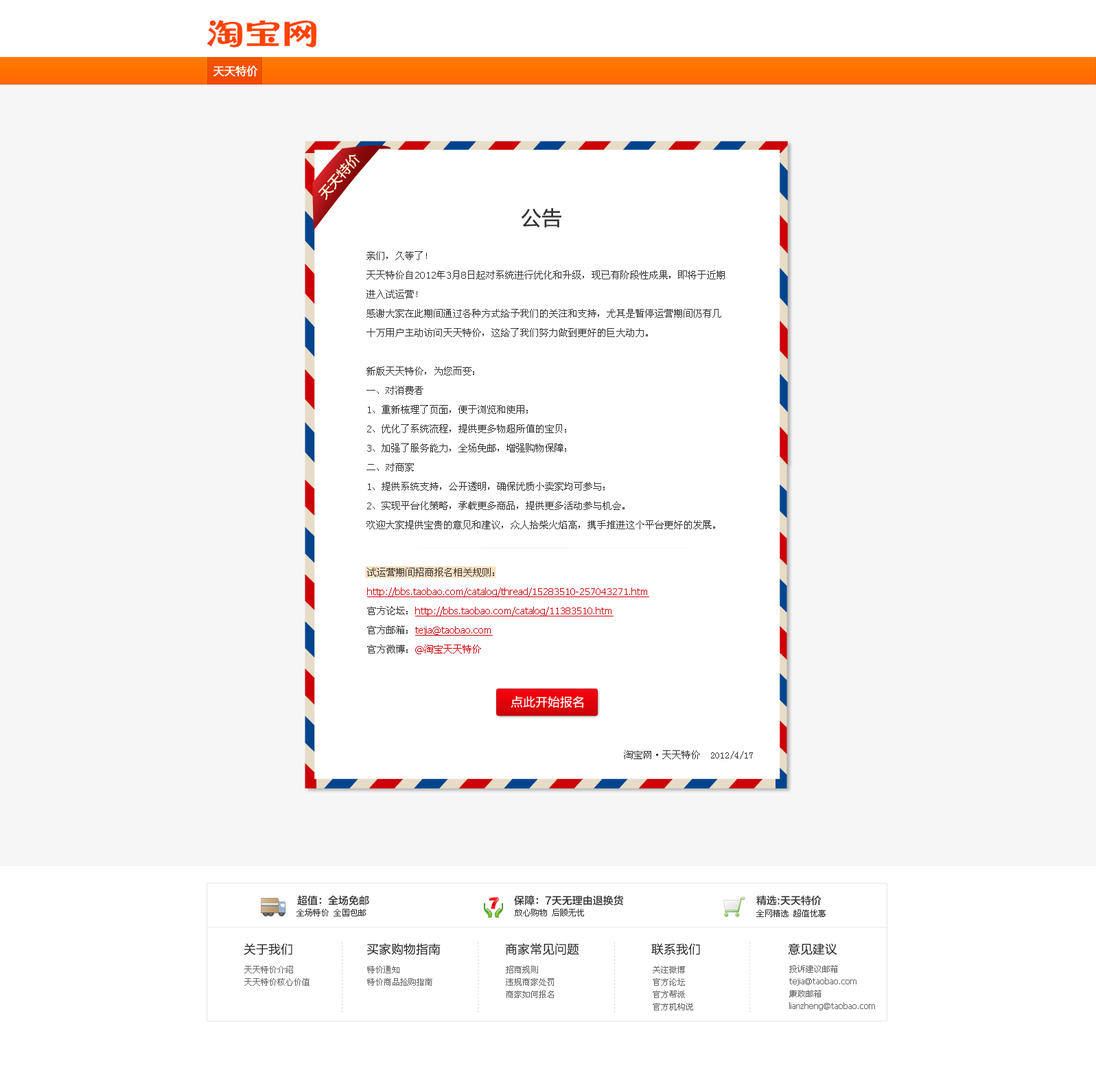
<style>
.page{position:relative;width:1096px;height:1088px;background:#f6f6f6}
.page>*{position:absolute;margin:0}
.t1{font:11.5px "FZLTHJW--GB1-0";letter-spacing:-0.01em;color:#ffffff;font-weight:bold;scale:0.95 1}
.t2{font:13.5px "FZLTZHK--GBK1-0";color:#fff0d3}
.t3{font:20.6px "FZLTZHUNHK--GBK1-0";color:#333333}
.t4{font:9.6px/19.2px "SimSun";color:#333333}
.t5{font:9.6px/19.2px "Tahoma";color:#333333}
.t6{font:9.6px/19.2px "Tahoma";color:#cc0208;text-decoration:underline}
.t7{font:9.6px/19.2px "Tahoma";color:#cc0208}
.t8{font:9.6px/19.2px "SimSun";color:#cc0208}
.t9{font:12.4px "FZLTZHUNHK--GBK1-0";color:#ffffff}
.t10{font:9.6px "SimSun";color:#333333}
.t11{font:10.3px "FZLTZHK--GBK1-0";color:#343434}
.t12{font:8.2px "SimSun";color:#343434}
.t13{font:12.4px "FZLTHJW--GB1-0";color:#232323}
.t14{font:8.2px/12.4px "SimSun";color:#666666}
.t15{font:8.2px/12.4px "Tahoma";color:#666666}
</style>
<div class="page">
<p class="t1" style="left:213px;top:65px;width:45px;height:12px">天天特价</p>
<p class="t2" style="left:318px;top:154px;width:42px;height:46px;rotate:-49deg">天天特价</p>
<p class="t3" style="left:521px;top:208px;width:40px;height:20px">公告</p>
<p class="t4" style="left:367px;top:251px;width:358px;height:278px">亲们，久等了！<br>天天特价自<span class="t5">2012</span>年<span class="t5">3</span>月<span class="t5">8</span>日起对系统进行优化和升级，现已有阶段性成果，即将于近期进入试运营！<br>感谢大家在此期间通过各种方式给予我们的关注和支持，尤其是暂停运营期间仍有几十万用户主动访问天天特价，这给了我们努力做到更好的巨大动力。<br><br>新版天天特价，为您而变：<br>一、对消费者<span class="t5"><br>1</span>、重新梳理了页面，便于浏览和使用；<span class="t5"><br>2</span>、优化了系统流程，提供更多物超所值的宝贝；<span class="t5"><br>3</span>、加强了服务能力，全场免邮，增强购物保障；<br>二、对商家<span class="t5"><br>1</span>、提供系统支持，公开透明，确保优质小卖家均可参与；<span class="t5"><br>2</span>、实现平台化策略，承载更多商品，提供更多活动参与机会。<br>欢迎大家提供宝贵的意见和建议，众人拾柴火焰高，携手推进这个平台更好的发展。</p>
<p class="t6" style="left:367px;top:568px;width:282px;height:86px"><span class="t4">试运营期间招商报名相关规则：<br></span>http://bbs.taobao.com/catalog/thread/15283510-257043271.htm<br><span class="t4">官方论坛：</span>http://bbs.taobao.com/catalog/11383510.htm<br><span class="t4">官方邮箱：</span>tejia@taobao.com<br><span class="t4">官方微博：</span><span class="t7">@</span><span class="t8">淘宝天天特价</span></p>
<p class="t9" style="left:511px;top:696px;width:72px;height:12px">点此开始报名</p>
<p class="t10" style="left:624px;top:750px;width:129px;height:9px">淘宝网·天天特价  2012/4/17</p>
<p class="t11" style="left:297px;top:895px;width:72px;height:10px">超值：全场免邮</p>
<p class="t11" style="left:514px;top:895px;width:110px;height:10px">保障：7天无理由退换货</p>
<p class="t11" style="left:756px;top:895px;width:66px;height:10px">精选:天天特价</p>
<p class="t12" style="left:297px;top:909px;width:69px;height:7px">全场特价 全国包邮</p>
<p class="t12" style="left:515px;top:909px;width:69px;height:7px">放心购物 后顾无忧</p>
<p class="t12" style="left:756px;top:909px;width:70px;height:8px">全网精选 超值优惠</p>
<p class="t13" style="left:244px;top:943px;width:48px;height:12px">关于我们</p>
<p class="t13" style="left:367px;top:943px;width:74px;height:12px">买家购物指南</p>
<p class="t13" style="left:505px;top:943px;width:74px;height:12px">商家常见问题</p>
<p class="t13" style="left:651px;top:943px;width:49px;height:12px">联系我们</p>
<p class="t13" style="left:788px;top:943px;width:49px;height:12px">意见建议</p>
<p class="t14" style="left:244px;top:966px;width:66px;height:20px">天天特价介绍<br>天天特价核心价值</p>
<p class="t14" style="left:367px;top:966px;width:65px;height:20px">特价通知<br>特价商品抢购指南</p>
<p class="t14" style="left:506px;top:966px;width:48px;height:32px">招商规则<br>违规商家处罚<br>商家如何报名</p>
<p class="t14" style="left:653px;top:966px;width:40px;height:44px">关注微博<br>官方论坛<br>官方帮派<br>官方机构说</p>
<p class="t15" style="left:789px;top:965px;width:86px;height:45px"><span class="t14">投诉建议邮箱</span><br>tejia@taobao.com<br><span class="t14">廉政邮箱</span><br>lianzheng@taobao.com</p>
</div>
